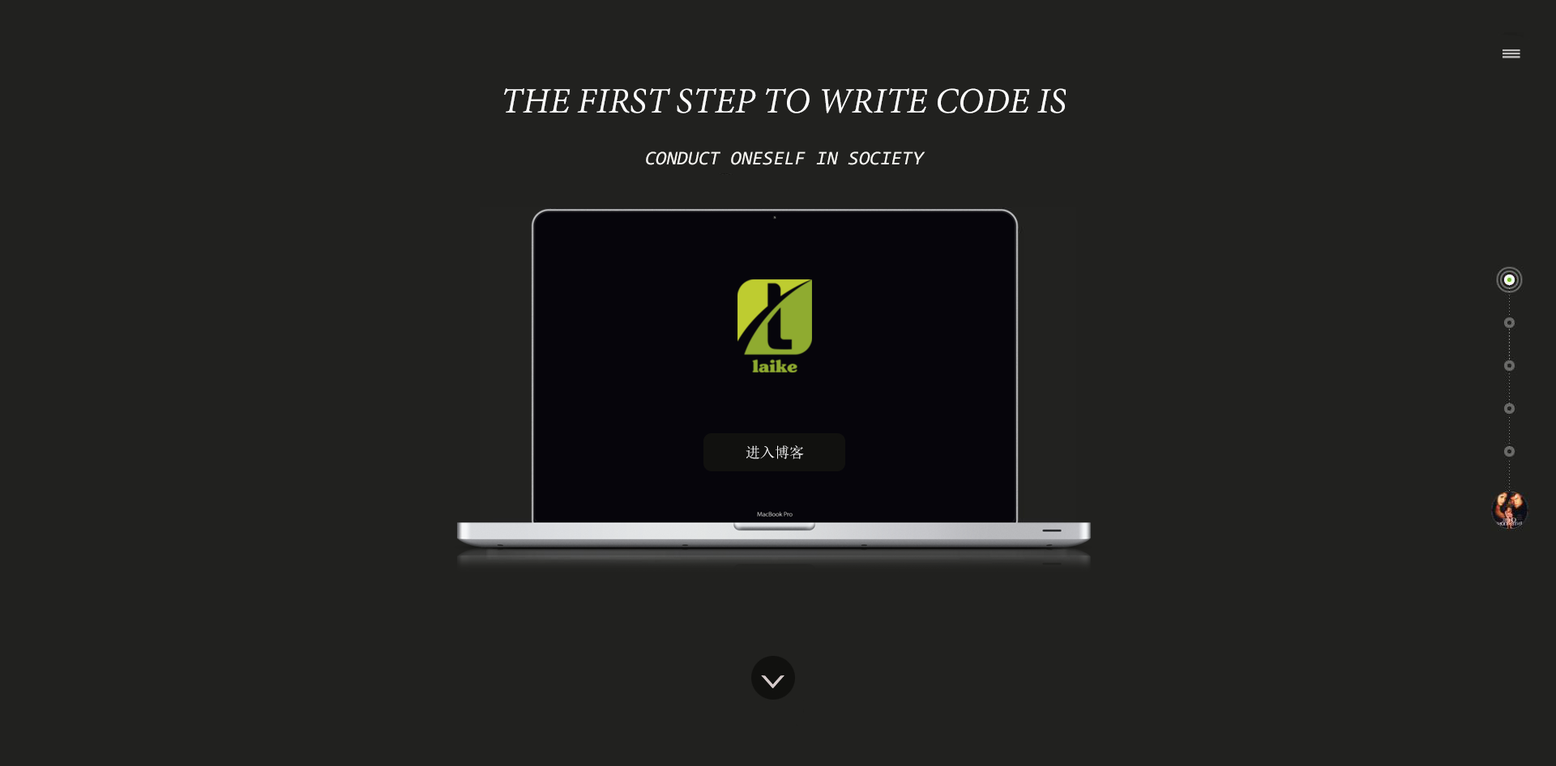
<style>
.page{position:relative;width:1556px;height:766px;background:#21211f}
.page>*{position:absolute;margin:0}
.t1{font:38.9px "AdobeDevanagari-Italic";color:#ffffff;text-transform:uppercase}
.t2{font:19.4px "Consolas-Italic";color:#f8f7f3;text-transform:uppercase}
.t3{font:14.6px "SimSun";color:#ffffff;text-transform:uppercase}
</style>
<div class="page">
<p class="t1" style="left:504px;top:88px;width:561px;height:25px">the first step to write Code is</p>
<p class="t2" style="left:646px;top:152px;width:279px;height:13px">conduct oneself in society</p>
<p class="t3" style="left:745px;top:446px;width:59px;height:13px">进入博客</p>
</div>
